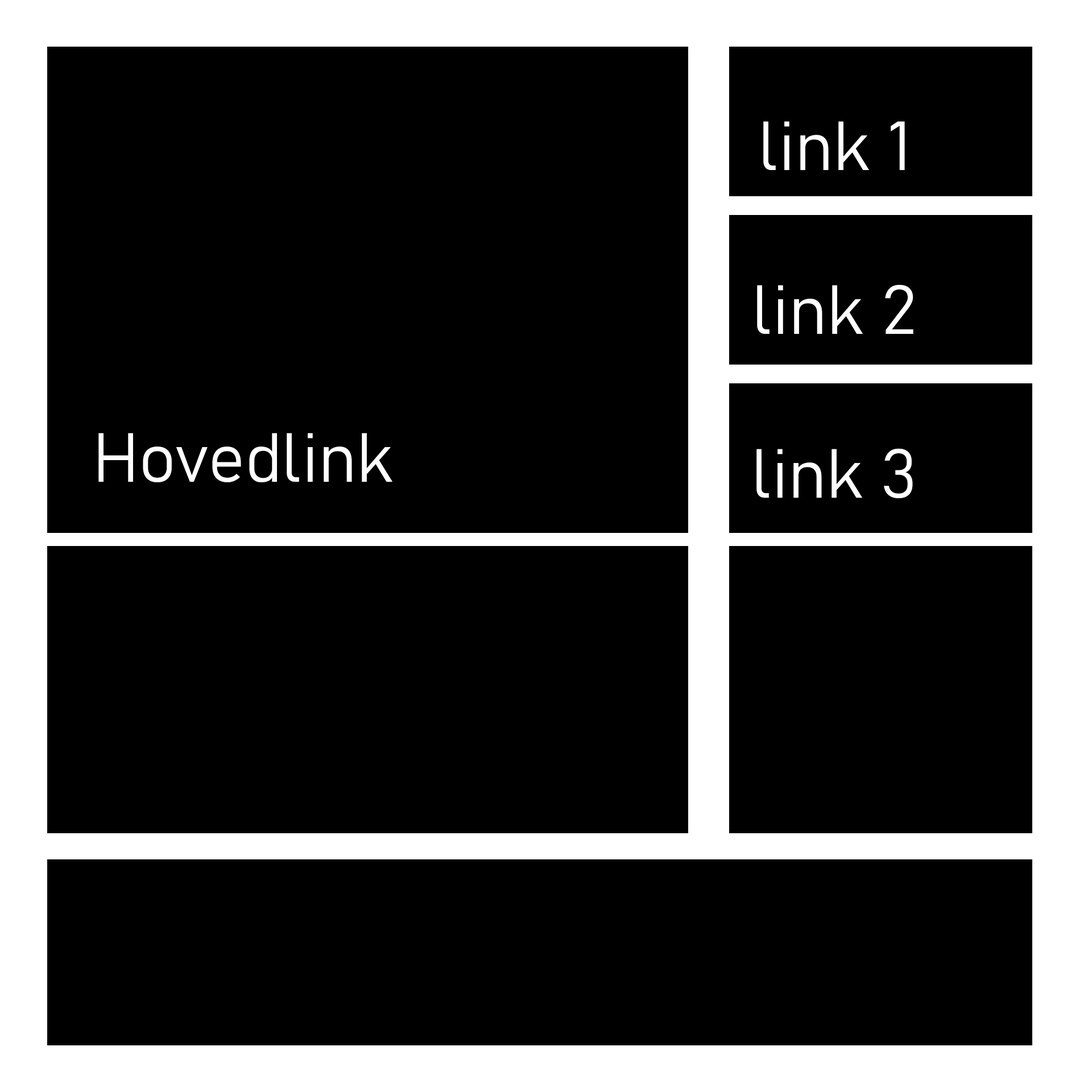
<style>
.page{position:relative;width:1092px;height:1092px;background:#000000}
.page>*{position:absolute;margin:0}
.t1{font:68.2px "Bahnschrift-Light";color:#ffffff}
</style>
<div class="page">
<p class="t1" style="left:756px;top:121px;width:157px;height:377px;text-align:center">link 1<br><br>link 2<br><br>link 3</p>
<p class="t1" style="left:98px;top:433px;width:294px;height:49px">Hovedlink</p>
</div>
